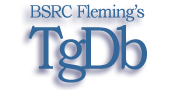
<style>
.page{position:relative;width:177px;height:90px;background:#ffffff}
.page>*{position:absolute;margin:0}
.t1{font:18px "BookmanOldStyle";letter-spacing:-0.055em;color:#336699;scale:0.9 1}
.t2{font:61px "BookmanOldStyle";letter-spacing:-0.13em;color:#336699;scale:0.9 1}
</style>
<div class="page">
<p class="t1" style="left:30px;top:4px;width:115px;height:18px">BSRC Fleming’s</p>
<p class="t2" style="left:28px;top:25px;width:119px;height:58px">TgDb</p>
</div>
